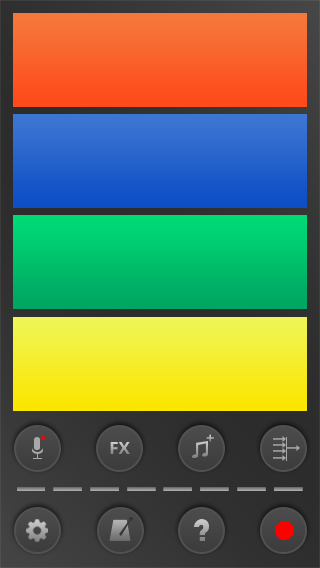
<style>
.page{position:relative;width:320px;height:568px}
.page>*{position:absolute;margin:0}
.t1{font:14px "OpenSans-Bold"}
.t2{font:16.9px "OpenSans-Bold"}
</style>
<div class="page">
<p class="t1" style="left:206px;top:434px;width:8px;height:8px">+</p>
<p class="t2" style="left:110px;top:442px;width:20px;height:12px">FX</p>
</div>
